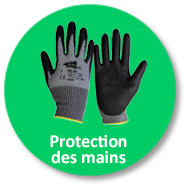
<style>
.page{position:relative;width:185px;height:185px;background:#00cc66}
.page>*{position:absolute;margin:0}
.t1{font:18px/16px "Calibri-Bold";color:#ffffff}
</style>
<div class="page">
<p class="t1" style="left:50px;top:135px;width:77px;height:29px;text-align:center">Protection  <br>des mains</p>
</div>
